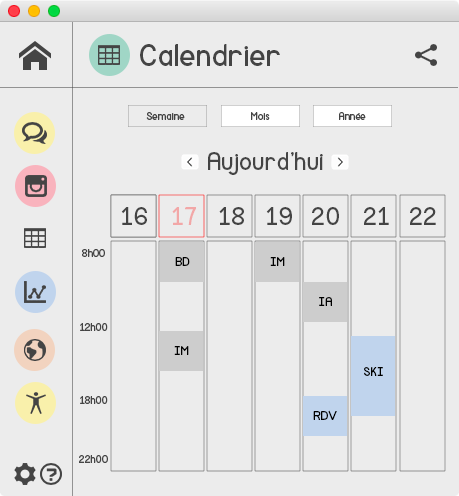
<style>
.page{position:relative;width:459px;height:496px;background:#ececec}
.page>*{position:absolute;margin:0}
.t1{font:30px "Mockup-Regular";color:#444444}
.t2{font:10px "Mockup-Regular";color:#444444}
.t3{font:24px "Mockup-Regular";color:#444444}
.t4{font:24px "Mockup-Regular";color:#f2a7a7}
.t5{font:12px "Mockup-Regular";color:#000000}
</style>
<div class="page">
<p class="t1" style="left:140px;top:44px;width:140px;height:22px">Calendrier</p>
<p class="t2" style="left:146px;top:112px;width:39px;height:8px">Semaine</p>
<p class="t2" style="left:251px;top:112px;width:19px;height:8px">Mois</p>
<p class="t2" style="left:339px;top:112px;width:27px;height:8px">Année</p>
<p class="t3" style="left:208px;top:152px;width:115px;height:23px">Aujourd’hui</p>
<p class="t3" style="left:121px;top:207px;width:26px;height:18px">16</p>
<p class="t4" style="left:172px;top:207px;width:24px;height:18px">17</p>
<p class="t3" style="left:219px;top:207px;width:25px;height:18px">18</p>
<p class="t3" style="left:266px;top:207px;width:26px;height:18px">19</p>
<p class="t3" style="left:312px;top:207px;width:27px;height:18px">20</p>
<p class="t3" style="left:364px;top:207px;width:25px;height:18px">21</p>
<p class="t3" style="left:410px;top:207px;width:26px;height:18px">22</p>
<p class="t2" style="left:82px;top:249px;width:23px;height:8px">8h00</p>
<p class="t5" style="left:175px;top:257px;width:15px;height:9px">BD</p>
<p class="t5" style="left:270px;top:257px;width:15px;height:9px">IM</p>
<p class="t5" style="left:319px;top:297px;width:13px;height:9px">IA</p>
<p class="t2" style="left:80px;top:323px;width:28px;height:8px">12h00</p>
<p class="t5" style="left:174px;top:346px;width:15px;height:9px">IM</p>
<p class="t5" style="left:364px;top:367px;width:19px;height:9px">SKI</p>
<p class="t2" style="left:80px;top:396px;width:28px;height:8px">18h00</p>
<p class="t5" style="left:313px;top:410px;width:24px;height:10px">RDV</p>
<p class="t2" style="left:79px;top:455px;width:29px;height:8px">22h00</p>
</div>
